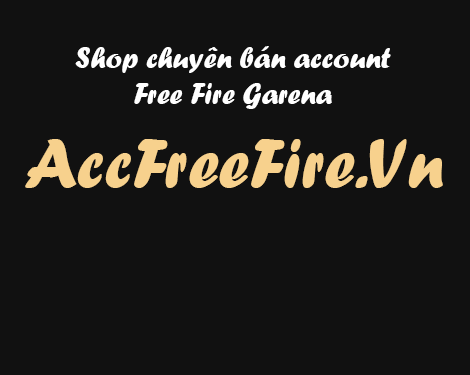
<style>
.page{position:relative;width:470px;height:375px;background:#111111}
.page>*{position:absolute;margin:0}
.t1{font:30px "ForteMT";color:#ffffff}
.t2{font:72px "ForteMT";color:#f7d18d}
</style>
<div class="page">
<p class="t1" style="left:75px;top:46px;width:316px;height:63px;text-align:center">Shop chuyên bán account<br>Free Fire Garena</p>
<p class="t2" style="left:25px;top:139px;width:418px;height:49px">AccFreeFire.Vn</p>
</div>
